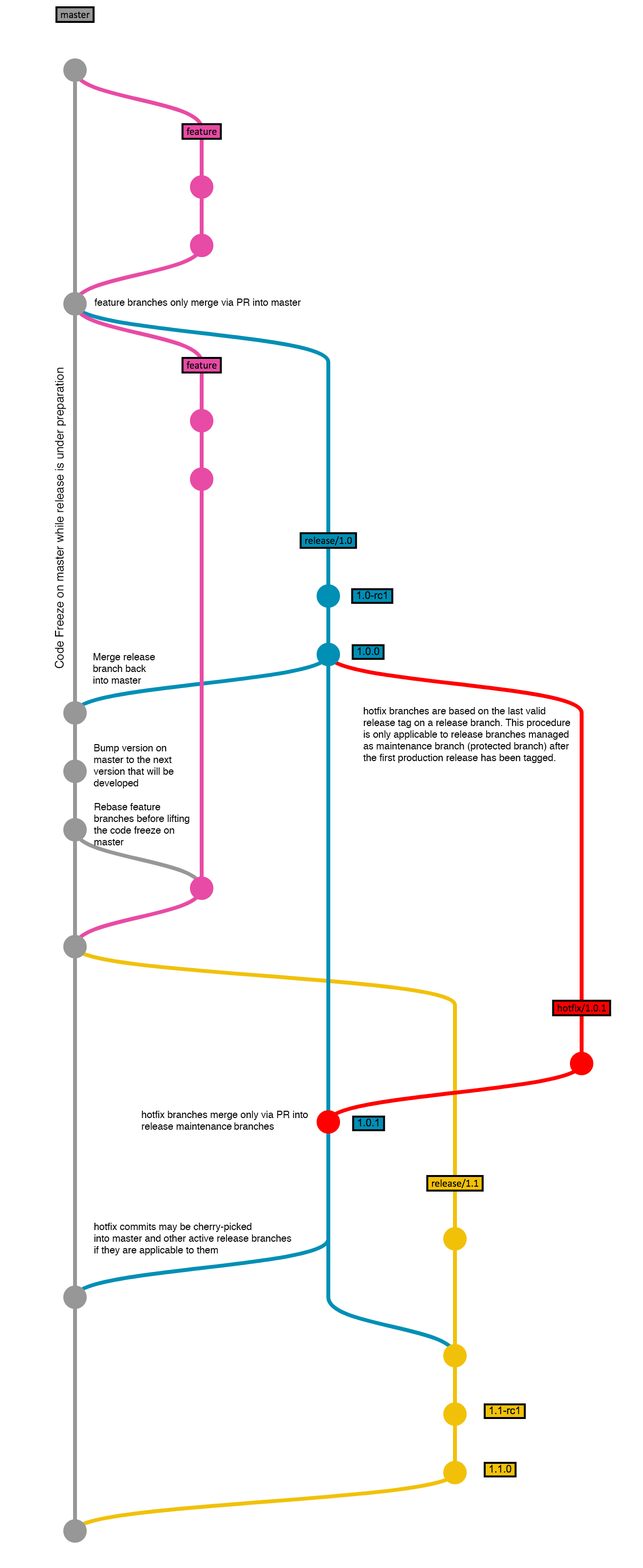
<style>
.page{position:relative;width:643px;height:1568px;background:#ffffff}
.page>*{position:absolute;margin:0}
.t1{font:9.7px "Helvetica";color:#000000}
.t2{font:11.7px "Helvetica";color:#000000}
</style>
<div class="page">
<p class="t1" style="left:94px;top:299px;width:207px;height:9px">feature branches only merge via PR into master</p>
<p class="t2" style="left:55px;top:368px;width:11px;height:301px;rotate:-90deg">Code Freeze on master while release is under preparation</p>
<p class="t1" style="left:93px;top:653px;width:62px;height:31px">Merge release<br>branch back<br>into master</p>
<p class="t1" style="left:363px;top:707px;width:207px;height:56px">hotfix branches are based on the last valid<br>release tag on a release branch. This procedure<br>is only applicable to release branches managed<br>as maintenance branch (protected branch) after<br>the first production release has been tagged.</p>
<p class="t1" style="left:93px;top:744px;width:81px;height:44px">Bump version on<br>master to the next<br>version that will be<br>developed</p>
<p class="t1" style="left:93px;top:803px;width:96px;height:42px">Rebase feature<br>branches before lifting<br>the code freeze on<br>master</p>
<p class="t1" style="left:142px;top:1111px;width:166px;height:19px">hotfix branches merge only via PR into<br>release maintenance branches</p>
<p class="t1" style="left:94px;top:1223px;width:197px;height:32px">hotfix commits may be cherry-picked<br>into master and other active release branches<br>if they are applicable to them</p>
</div>
